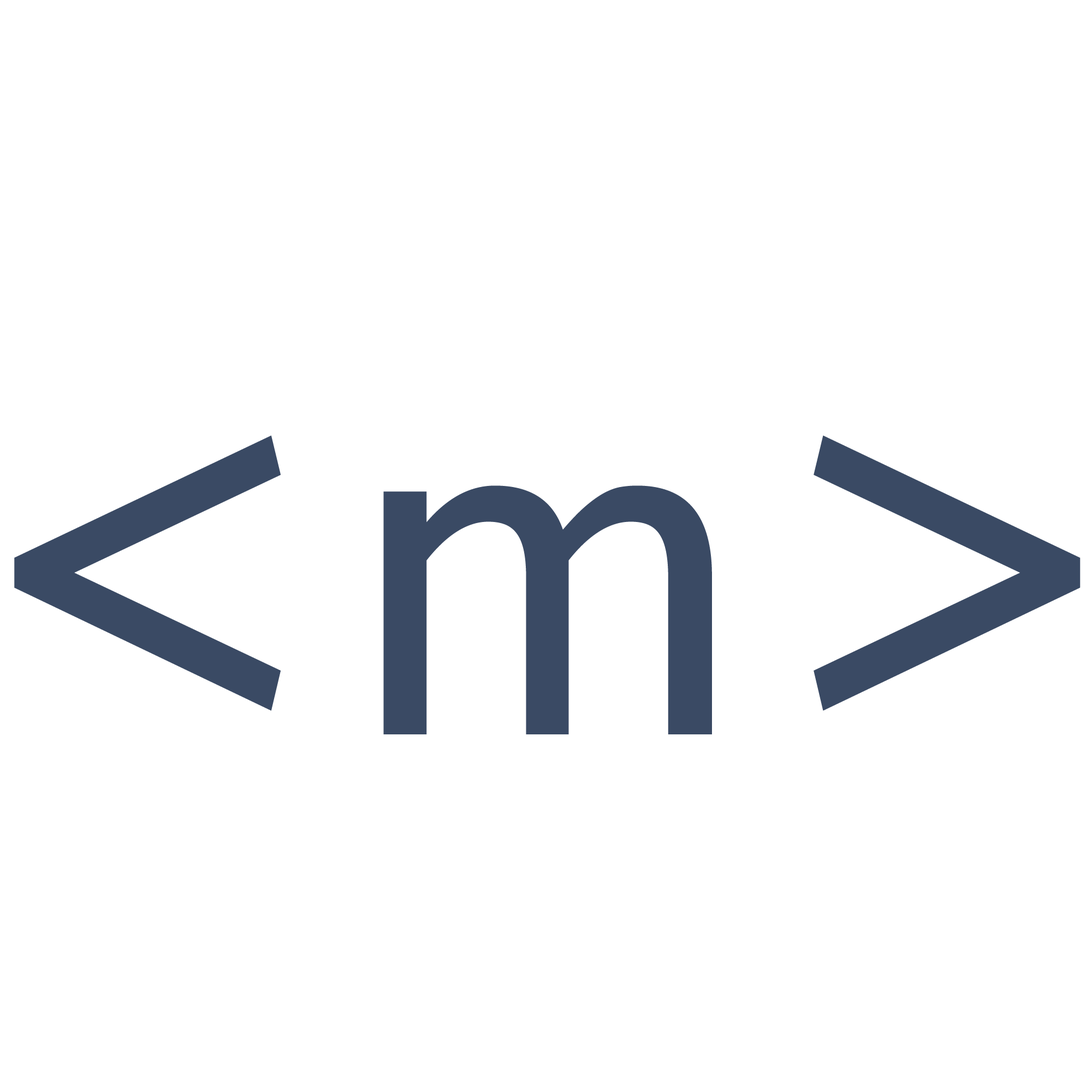
<style>
.page{position:relative;width:1092px;height:1092px;background:#ffffff}
.page>*{position:absolute;margin:0}
.t1{font:507.6px "Gautami";letter-spacing:-0.14em;color:#3a4a64}
</style>
<div class="page">
<p class="t1" style="left:14px;top:435px;width:1067px;height:299px">&lt; m &gt;</p>
</div>
